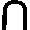
<style>
.page{position:relative;width:30px;height:30px;background:#ffffff}
.page>*{position:absolute;margin:0}
.t1{font:43.1px "ArialMT";color:#000000}
</style>
<div class="page">
<p class="t1" style="left:2px;top:0px;width:25px;height:32px;rotate:-179deg">U</p>
</div>
